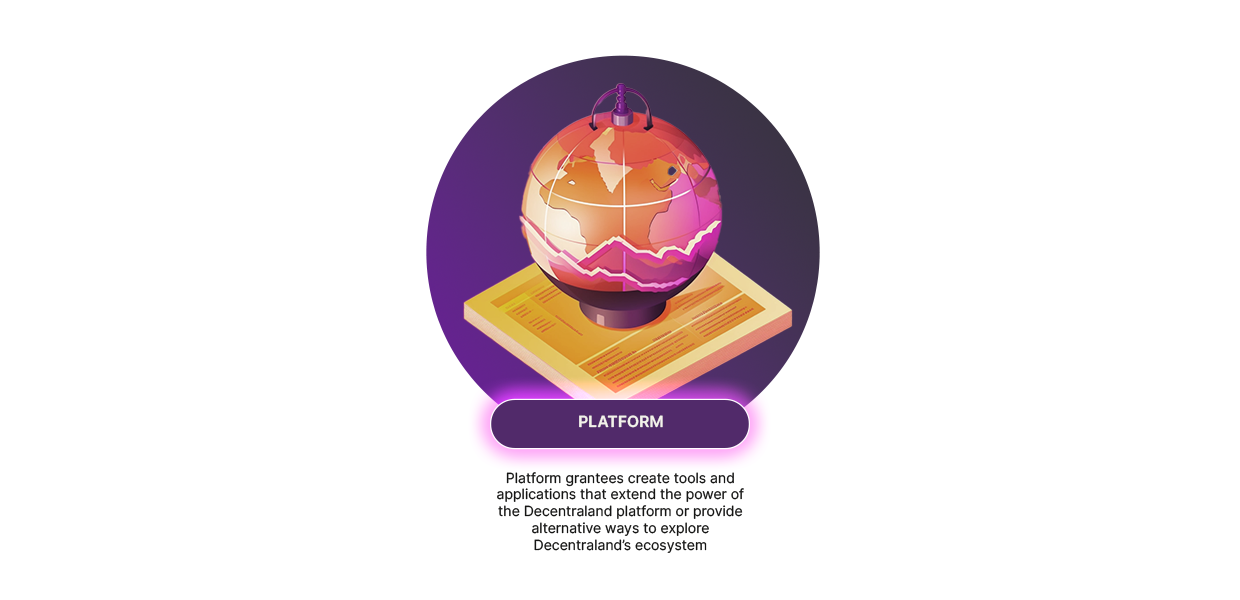
<style>
.page{position:relative;width:1240px;height:600px;background:#ffffff}
.page>*{position:absolute;margin:0}
.t1{font:15.4px "Inter-SemiBold";color:#f3f2eb;text-transform:uppercase}
.t2{font:14px "Inter-Regular";color:#151514}
</style>
<div class="page">
<p class="t1" style="left:579px;top:415px;width:84px;height:13px">Platform</p>
<p class="t2" style="left:497px;top:472px;width:247px;height:81px;text-align:center">Platform grantees create tools and applications that extend the power of the Decentraland platform or provide alternative ways to explore Decentraland’s ecosystem</p>
</div>
